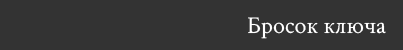
<style>
.page{position:relative;width:403px;height:50px;background:#333333}
.page>*{position:absolute;margin:0}
.t1{font:24px "CrimsonText-Regular";color:#ffffff}
</style>
<div class="page">
<p class="t1" style="left:248px;top:17px;width:138px;height:22px">Бросок ключа</p>
</div>
